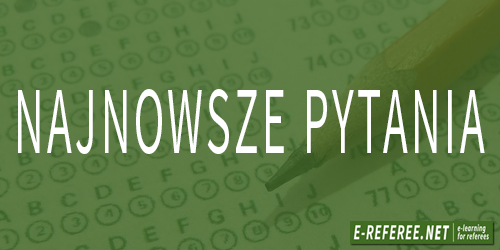
<style>
.page{position:relative;width:500px;height:250px}
.page>*{position:absolute;margin:0}
.t1{font:96.1px "SourceSansPro-Regular";letter-spacing:0.08em;color:#ffffff;scale:0.48 1}
</style>
<div class="page">
<p class="t1" style="left:18px;top:89px;width:467px;height:65px">NAJNOWSZE PYTANIA</p>
</div>
